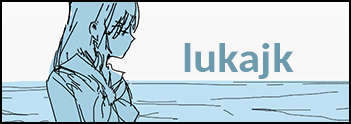
<style>
.page{position:relative;width:351px;height:124px;background:#f8f8f8}
.page>*{position:absolute;margin:0}
.t1{font:42.2px "Carlito-Bold";color:#6d9bad;scale:1.07 1}
</style>
<div class="page">
<p class="t1" style="left:184px;top:43px;width:110px;height:36px">lukajk</p>
</div>
